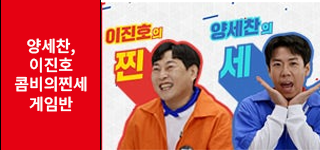
<style>
.page{position:relative;width:320px;height:150px;background:#e50112}
.page>*{position:absolute;margin:0}
.t1{font:16px "NotoSansKR-SemiBold";color:#fefefe}
</style>
<div class="page">
<p class="t1" style="left:14px;top:38px;width:73px;height:74px;text-align:center">양세찬,<br>이진호<br> 콤비의찐세 <br>게임반</p>
</div>
